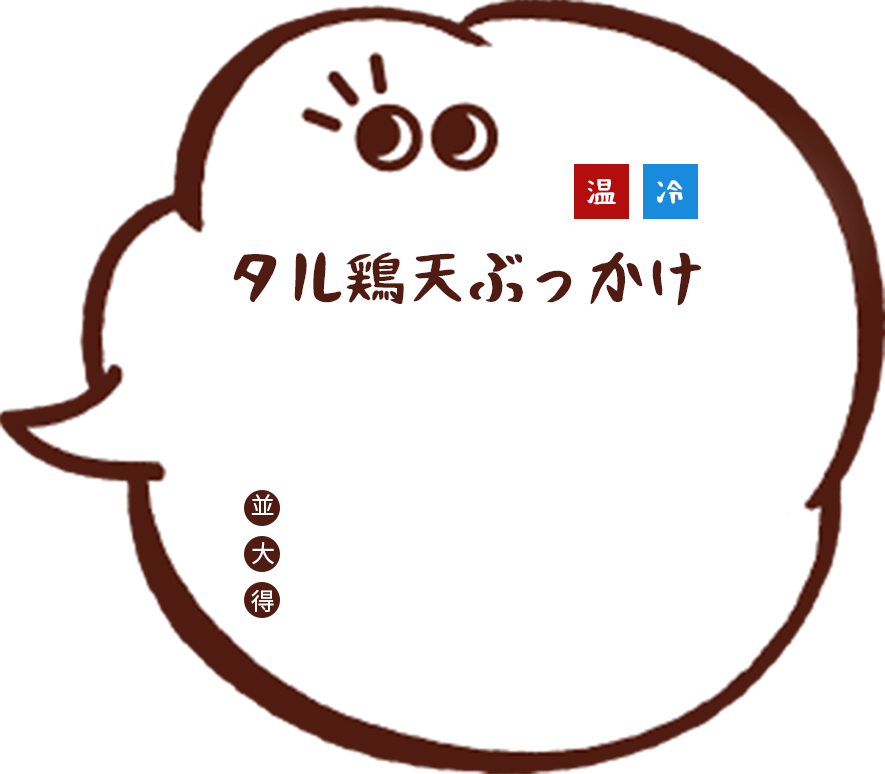
<style>
.page{position:relative;width:885px;height:774px;background:#ffffff}
.page>*{position:absolute;margin:0}
.t1{font:60px "Otsutome_font-Bold";color:#501c11}
.t2{font:24px/48px "NotoSansJP-Regular";color:#ffffff}
</style>
<div class="page">
<p class="t1" style="left:233px;top:252px;width:469px;height:54px">タル鶏天ぶっかけ</p>
<p class="t2" style="left:251px;top:494px;width:23px;height:118px">並　<br>大　<br>得</p>
</div>
